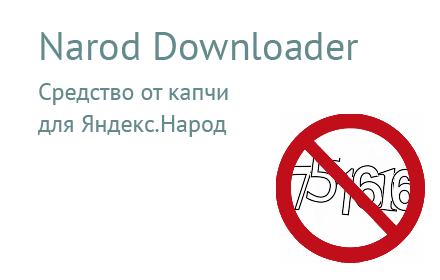
<style>
.page{position:relative;width:440px;height:280px;background:#ffffff}
.page>*{position:absolute;margin:0}
.t1{font:24px/40px "PTSans-Regular";color:#648a8c}
.t2{font:40px/42.7px "PTSans-Regular";color:#648a8c}
.t3{font:24px/32px "PTSans-Regular";color:#648a8c}
</style>
<div class="page">
<p class="t1" style="left:38px;top:32px;width:321px;height:105px"><span class="t2">Narod Downloader<br></span>Средство от капчи <br><span class="t3">для Яндекс.Народ</span></p>
</div>
